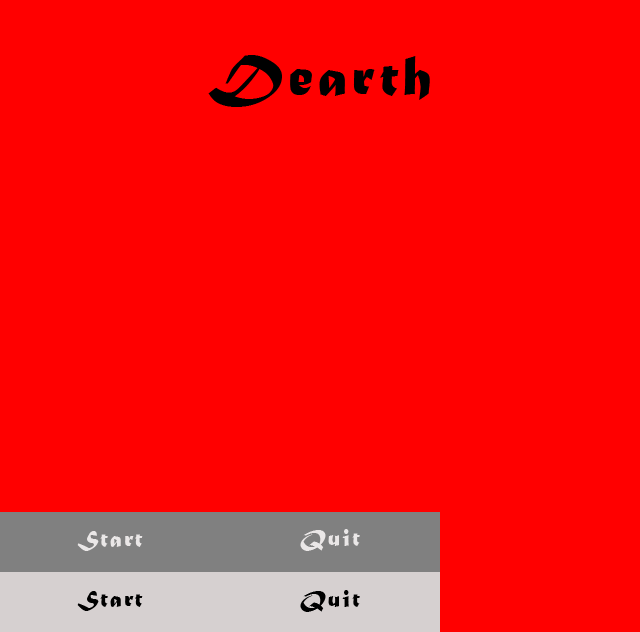
<style>
.page{position:relative;width:640px;height:632px;background:#ff0000}
.page>*{position:absolute;margin:0}
.t1{font:60px "MaturaMTScriptCapitals";letter-spacing:0.075em;color:#000000}
.t2{font:24px "MaturaMTScriptCapitals";letter-spacing:0.075em;color:#eae7e7}
.t3{font:24px "MaturaMTScriptCapitals";letter-spacing:0.075em;color:#000000}
</style>
<div class="page">
<p class="t1" style="left:208px;top:55px;width:222px;height:52px">Dearth</p>
<p class="t2" style="left:77px;top:531px;width:66px;height:20px">Start</p>
<p class="t2" style="left:300px;top:529px;width:60px;height:22px">Quit</p>
<p class="t3" style="left:77px;top:591px;width:66px;height:20px">Start</p>
<p class="t3" style="left:300px;top:590px;width:60px;height:22px">Quit</p>
</div>
